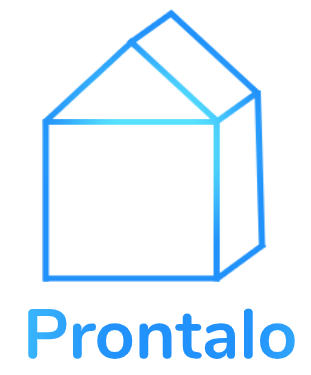
<style>
.page{position:relative;width:311px;height:375px;background:#ffffff}
.page>*{position:absolute;margin:0}
.t1{font:70px "Nunito-Bold";color:#2191fb}
</style>
<div class="page">
<p class="t1" style="left:28px;top:308px;width:267px;height:51px">Prontalo</p>
</div>
